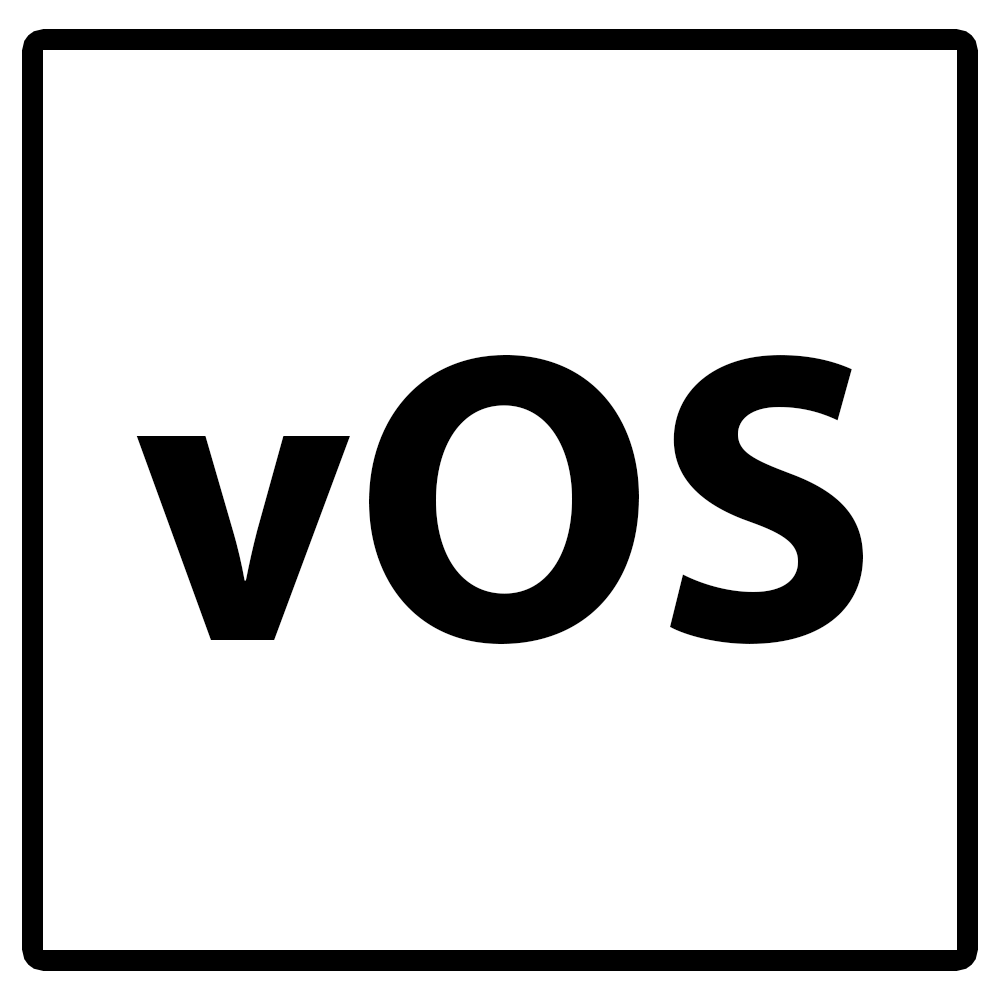
<style>
.page{position:relative;width:1000px;height:1000px;background:#ffffff}
.page>*{position:absolute;margin:0}
.t1{font:416.7px "MyriadPro-Bold";color:#000000}
</style>
<div class="page">
<p class="t1" style="left:136px;top:355px;width:727px;height:290px">vOS</p>
</div>
